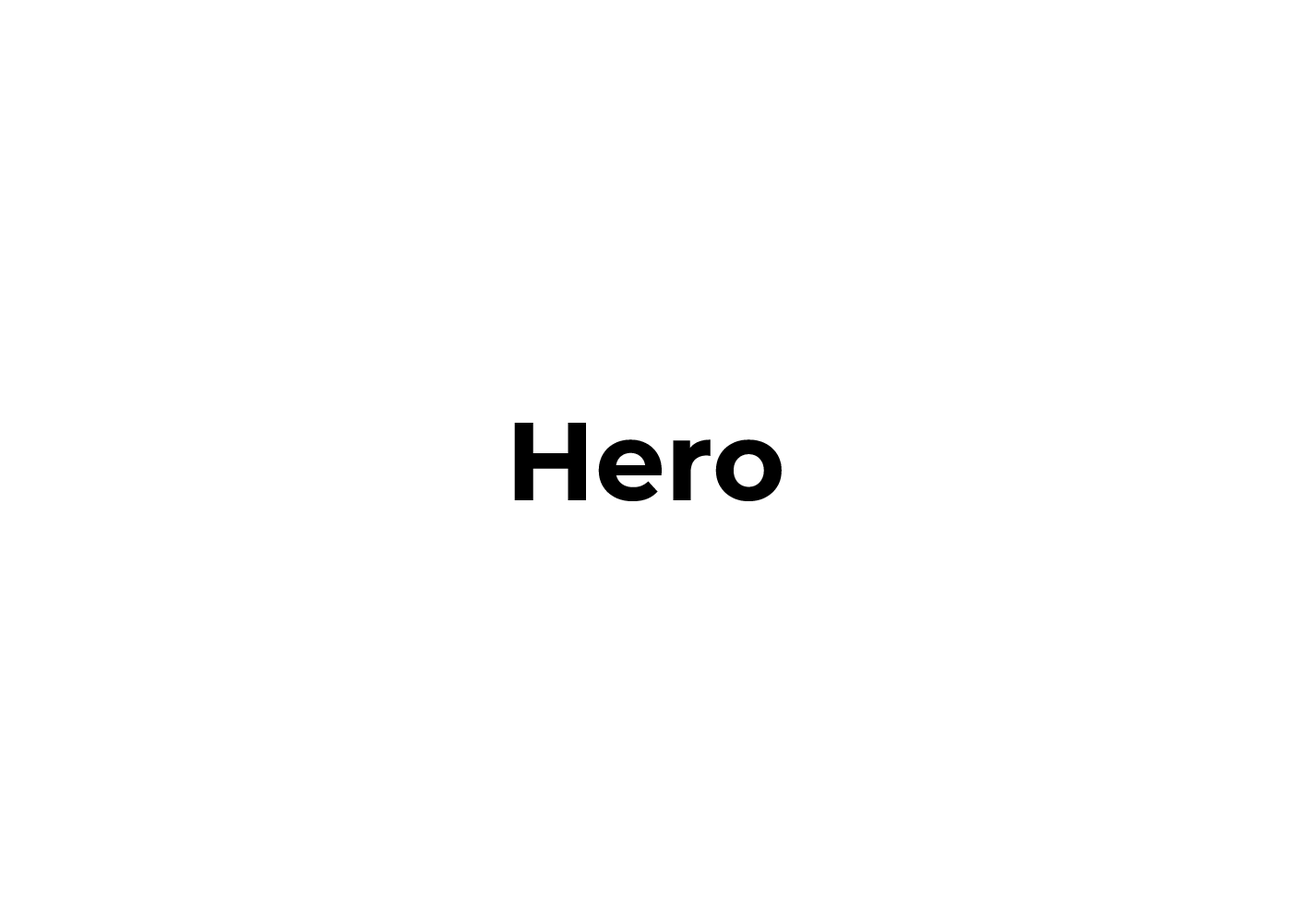
<style>
.page{position:relative;width:1292px;height:923px;background:#ffffff}
.page>*{position:absolute;margin:0}
.t1{font:110.7px "Montserrat-Bold";color:#000000}
</style>
<div class="page">
<p class="t1" style="left:514px;top:423px;width:268px;height:78px">Hero</p>
</div>
